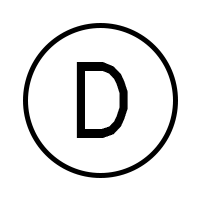
<style>
.page{position:relative;width:200px;height:200px;background:#ffffff}
.page>*{position:absolute;margin:0}
.t1{font:100px "AIGDT";color:#000000}
</style>
<div class="page">
<p class="t1" style="left:76px;top:62px;width:52px;height:76px">D</p>
</div>
